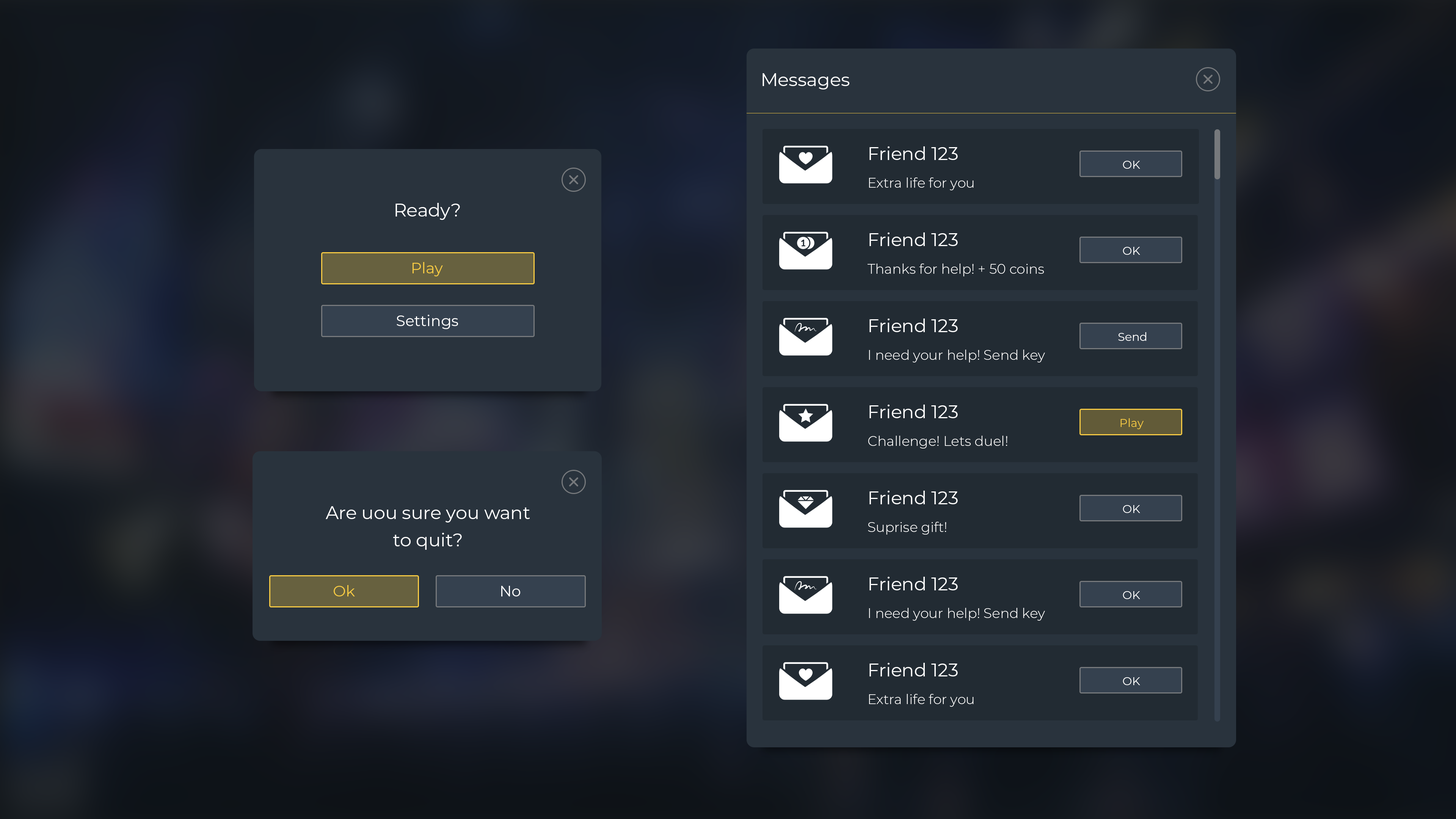
<style>
.page{position:relative;width:1456px;height:819px}
.page>*{position:absolute;margin:0}
.t1{font:18.2px "Montserrat-Regular";color:#ffffff}
.t2{font:11.4px "Montserrat-Regular";color:#ffffff}
.t3{font:13.7px "Montserrat-Light";color:#ffffff}
.t4{font:15.2px "Montserrat-Regular";color:#f6ca43}
.t5{font:15.2px "Montserrat-Regular";color:#ffffff}
.t6{font:11.4px "Montserrat-Regular";color:#f6ca43}
.t7{font:18.2px/27.3px "Montserrat-Regular";color:#ffffff}
.t8{font:11.4px "Montserrat-Regular";color:#fffffe}
</style>
<div class="page">
<p class="t1" style="left:762px;top:73px;width:87px;height:16px">Messages</p>
<p class="t1" style="left:869px;top:146px;width:89px;height:14px">Friend 123</p>
<p class="t2" style="left:1123px;top:161px;width:17px;height:8px">OK</p>
<p class="t3" style="left:869px;top:177px;width:105px;height:13px">Extra life for you</p>
<p class="t1" style="left:395px;top:203px;width:65px;height:17px">Ready?</p>
<p class="t1" style="left:869px;top:232px;width:89px;height:14px">Friend 123</p>
<p class="t2" style="left:1123px;top:247px;width:17px;height:8px">OK</p>
<p class="t4" style="left:413px;top:262px;width:30px;height:14px">Play</p>
<p class="t3" style="left:868px;top:264px;width:176px;height:12px">Thanks for help! + 50 coins</p>
<p class="t5" style="left:397px;top:315px;width:61px;height:14px">Settings</p>
<p class="t1" style="left:869px;top:318px;width:89px;height:14px">Friend 123</p>
<p class="t2" style="left:1118px;top:332px;width:28px;height:9px">Send</p>
<p class="t3" style="left:869px;top:350px;width:176px;height:12px">I need your help! Send key</p>
<p class="t1" style="left:869px;top:405px;width:89px;height:13px">Friend 123</p>
<p class="t6" style="left:1120px;top:418px;width:24px;height:11px">Play</p>
<p class="t3" style="left:868px;top:436px;width:139px;height:13px">Challenge! Lets duel!</p>
<p class="t1" style="left:869px;top:491px;width:89px;height:13px">Friend 123</p>
<p class="t7" style="left:326px;top:506px;width:204px;height:44px;text-align:center">Are uou sure you want<br>to quit?</p>
<p class="t2" style="left:1123px;top:505px;width:17px;height:8px">OK</p>
<p class="t3" style="left:868px;top:522px;width:78px;height:13px">Suprise gift!</p>
<p class="t1" style="left:869px;top:577px;width:89px;height:13px">Friend 123</p>
<p class="t4" style="left:334px;top:585px;width:21px;height:11px">Ok</p>
<p class="t5" style="left:501px;top:586px;width:19px;height:10px">No</p>
<p class="t2" style="left:1123px;top:591px;width:17px;height:8px">OK</p>
<p class="t3" style="left:869px;top:608px;width:176px;height:13px">I need your help! Send key</p>
<p class="t1" style="left:869px;top:663px;width:89px;height:13px">Friend 123</p>
<p class="t8" style="left:1123px;top:677px;width:17px;height:8px">OK</p>
<p class="t3" style="left:869px;top:694px;width:105px;height:13px">Extra life for you</p>
</div>
